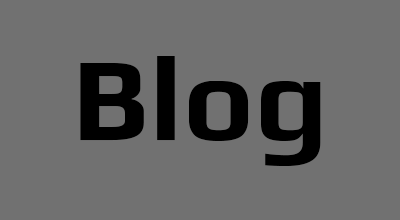
<style>
.page{position:relative;width:400px;height:220px;background:#717171}
.page>*{position:absolute;margin:0}
.t1{font:120px "Play-Bold";letter-spacing:0.004em;color:#000000}
</style>
<div class="page">
<p class="t1" style="left:80px;top:56px;width:241px;height:110px">Blog</p>
</div>
